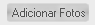
<style>
.page{position:relative;width:95px;height:25px;background:#ececec}
.page>*{position:absolute;margin:0}
.t1{font:8px "ASI_System";color:#545454}
</style>
<div class="page">
<p class="t1" style="left:12px;top:8px;width:73px;height:9px">Adicionar Fotos</p>
</div>
